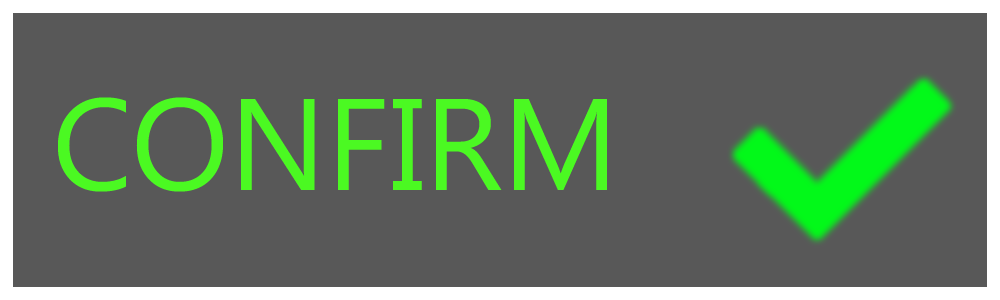
<style>
.page{position:relative;width:1000px;height:300px;background:#585858}
.page>*{position:absolute;margin:0}
.t1{font:130px "SegoeUI";color:#4bf922}
</style>
<div class="page">
<p class="t1" style="left:58px;top:97px;width:549px;height:95px">CONFIRM</p>
</div>
